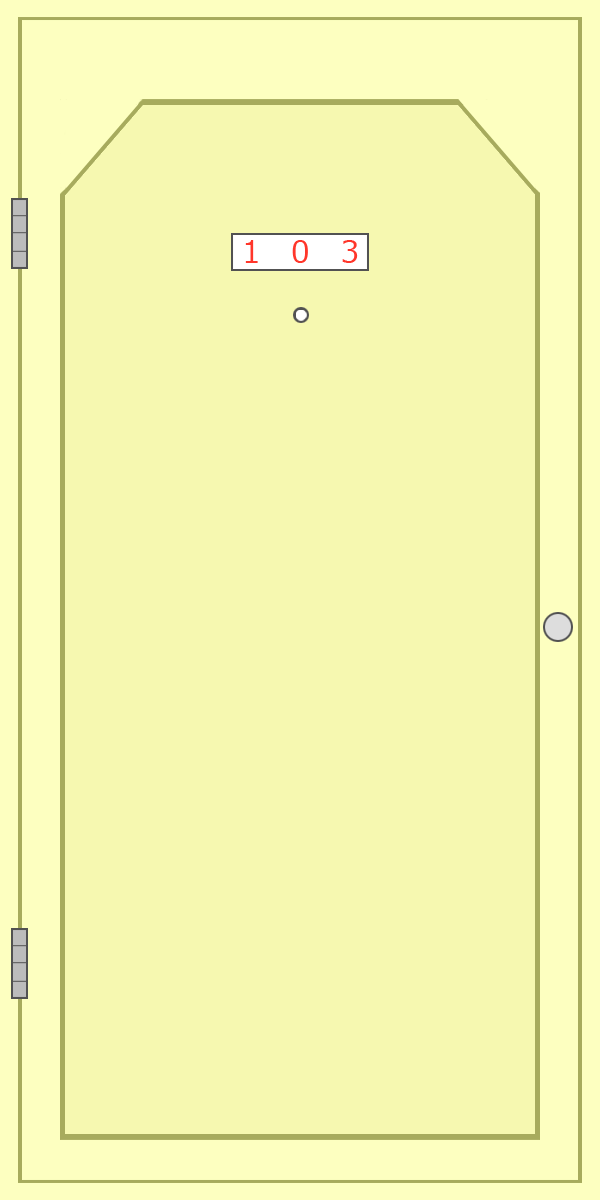
<style>
.page{position:relative;width:600px;height:1200px;background:#f6f8b0}
.page>*{position:absolute;margin:0}
.t1{font:30px "Meiryo";color:#ff362a}
</style>
<div class="page">
<p class="t1" style="left:245px;top:240px;width:113px;height:23px">1   0   3</p>
</div>
